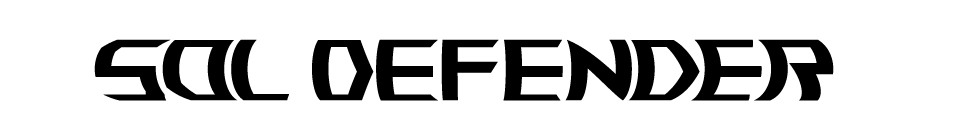
<style>
.page{position:relative;width:960px;height:128px;background:#ffffff}
.page>*{position:absolute;margin:0}
.t1{font:70.6px "ROGFonts-Regular";color:#000000}
</style>
<div class="page">
<p class="t1" style="left:94px;top:39px;width:740px;height:62px">Sol Defender</p>
</div>
